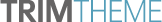
<style>
.page{position:relative;width:162px;height:22px;background:#ffffff}
.page>*{position:absolute;margin:0}
.t1{font:34px "Colaborate-Thin";letter-spacing:-0.05em;color:#549eb9}
.t2{font:34px "Colaborate-Medium";letter-spacing:-0.05em;color:#656464}
</style>
<div class="page">
<p class="t1" style="left:0px;top:0px;width:162px;height:22px"><span class="t2">TRIM</span>THEME</p>
</div>
